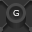
<style>
.page{position:relative;width:32px;height:32px;background:#333333}
.page>*{position:absolute;margin:0}
.t1{font:8px "Verdana"}
</style>
<div class="page">
<p class="t1" style="left:13px;top:10px;width:6px;height:6px">G</p>
</div>
